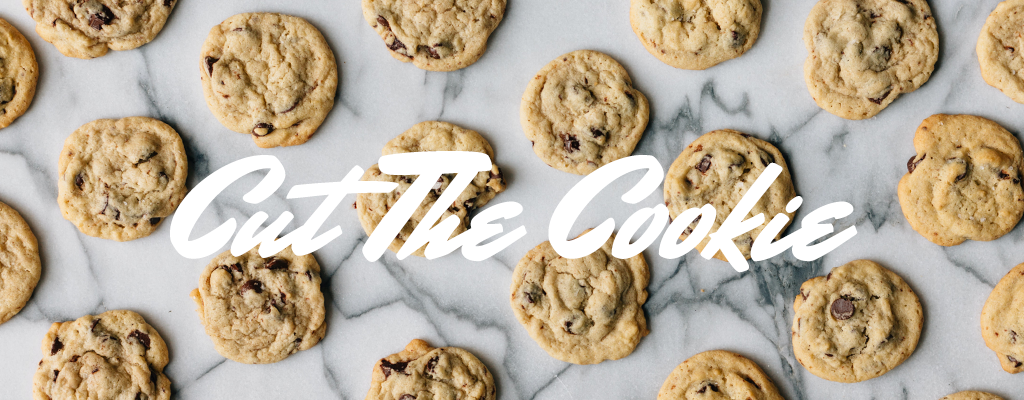
<style>
.page{position:relative;width:1024px;height:400px}
.page>*{position:absolute;margin:0}
.t1{font:150px "MrStalwartPro";color:#ffffff}
</style>
<div class="page">
<p class="t1" style="left:170px;top:151px;width:688px;height:122px">Cut The Cookie</p>
</div>
